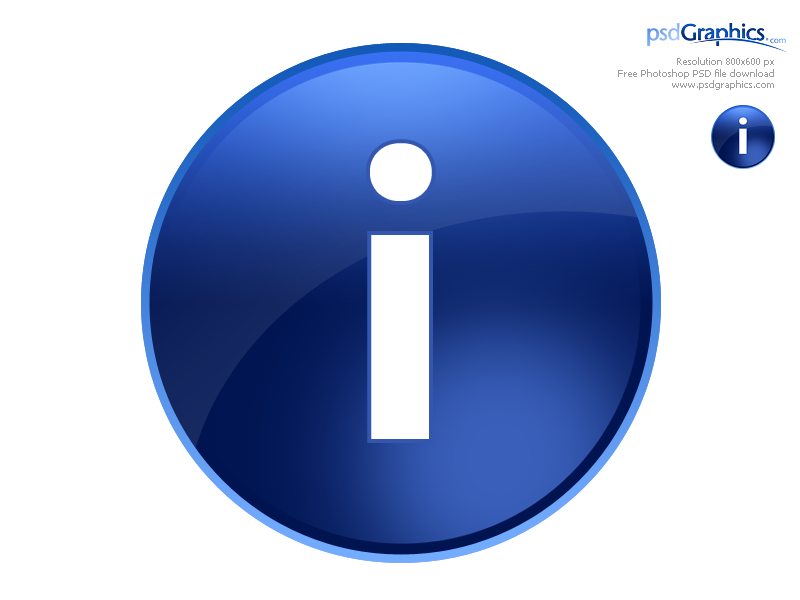
<style>
.page{position:relative;width:800px;height:600px;background:#ffffff}
.page>*{position:absolute;margin:0}
.t1{font:9.7px "Tahoma";color:#9c9c9c}
.t2{font:433px "MyriadPro-Bold";color:#ffffff}
</style>
<div class="page">
<p class="t1" style="left:618px;top:57px;width:156px;height:33px;text-align:right">Resolution 800x600 px<br>Free Photoshop PSD file download<br>www.psdgraphics.com</p>
<p class="t2" style="left:366px;top:139px;width:70px;height:304px">i</p>
</div>
